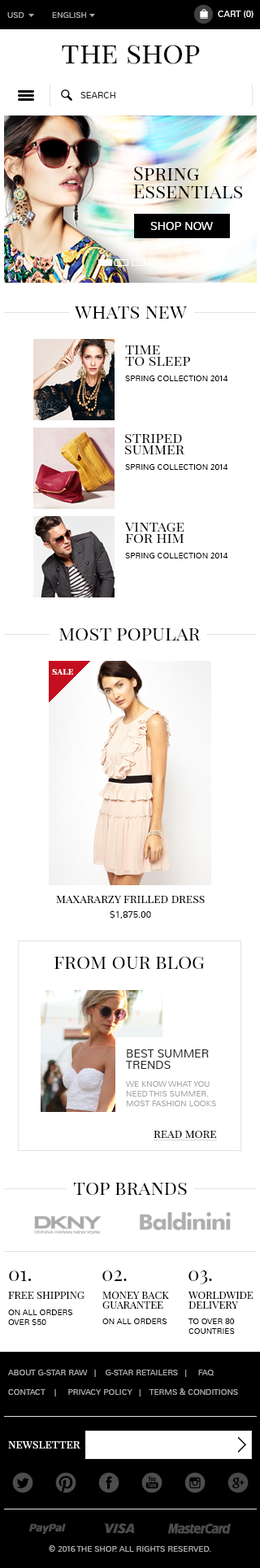
<style>
.page{position:relative;width:260px;height:1568px;background:#ffffff}
.page>*{position:absolute;margin:0}
.t1{font:8.1px "Nunito-Light";color:#aaaaaa;text-transform:uppercase}
.t2{font:8.9px "Nunito-Light";color:#ffffff;text-transform:uppercase}
.t3{font:29.3px "PlayfairDisplaySC-Regular";color:#000000}
.t4{font:8.9px "Nunito-Light";color:#282828;text-transform:uppercase}
.t5{font:19.5px/17.9px "PlayfairDisplaySC-Regular";color:#000000}
.t6{font:11.4px "Nunito-Light";color:#ffffff;text-transform:uppercase}
.t7{font:19.5px "PlayfairDisplaySC-Regular";color:#000000}
.t8{font:14.6px/11.4px "PlayfairDisplaySC-Regular";color:#000000}
.t9{font:8.1px "Nunito-Light";color:#000000;text-transform:uppercase}
.t10{font:8.9px "PlayfairDisplaySC-Bold";color:#ffffff}
.t11{font:11.4px "PlayfairDisplaySC-Regular";color:#000000}
.t12{font:8.9px "Nunito-Light";color:#000000}
.t13{font:11.4px/11.4px "Nunito-Light";color:#282828;text-transform:uppercase}
.t14{font:11.4px "PlayfairDisplaySC-Regular";color:#000000;text-decoration:underline}
.t15{font:10.6px "PlayfairDisplaySC-Regular";color:#000000;text-transform:uppercase}
.t16{font:10.6px/9.8px "PlayfairDisplaySC-Regular";color:#000000;text-transform:uppercase}
.t17{font:8.1px/19.5px "Nunito-Light";color:#aaaaaa;text-transform:uppercase}
.t18{font:11.4px "PlayfairDisplaySC-Regular";color:#ffffff}
</style>
<div class="page">
<p class="t1" style="left:7px;top:12px;width:17px;height:6px">usD</p>
<p class="t1" style="left:52px;top:12px;width:34px;height:6px">English</p>
<p class="t2" style="left:218px;top:11px;width:36px;height:7px">Cart (0)</p>
<p class="t3" style="left:62px;top:45px;width:138px;height:19px">the shop</p>
<p class="t4" style="left:80px;top:92px;width:35px;height:6px">search</p>
<p class="t5" style="left:133px;top:167px;width:110px;height:31px">Spring<br>Essentials</p>
<p class="t6" style="left:150px;top:222px;width:63px;height:8px">shop now</p>
<p class="t7" style="left:74px;top:306px;width:113px;height:13px">whats new</p>
<p class="t8" style="left:125px;top:345px;width:65px;height:21px">time<br>to sleep</p>
<p class="t9" style="left:125px;top:376px;width:103px;height:5px">spring collection 2014</p>
<p class="t8" style="left:125px;top:434px;width:60px;height:20px">striped<br>summer</p>
<p class="t9" style="left:125px;top:464px;width:103px;height:6px">spring collection 2014</p>
<p class="t8" style="left:125px;top:523px;width:60px;height:20px">vintage<br>for him</p>
<p class="t9" style="left:125px;top:553px;width:103px;height:5px">spring collection 2014</p>
<p class="t7" style="left:59px;top:628px;width:142px;height:13px">most popular</p>
<p class="t10" style="left:52px;top:669px;width:21px;height:6px">sale</p>
<p class="t11" style="left:56px;top:896px;width:149px;height:7px">maxararzy frilled dress</p>
<p class="t12" style="left:110px;top:910px;width:41px;height:9px">$1,875.00</p>
<p class="t7" style="left:54px;top:957px;width:151px;height:12px">from our blog</p>
<p class="t13" style="left:126px;top:1049px;width:83px;height:20px">best summer<br>trends</p>
<p class="t1" style="left:126px;top:1081px;width:90px;height:25px">we know what you<br>need this summer.<br>most fashion looks</p>
<p class="t14" style="left:154px;top:1131px;width:63px;height:9px">read more</p>
<p class="t7" style="left:73px;top:1183px;width:114px;height:12px">top brands</p>
<p class="t7" style="left:9px;top:1270px;width:22px;height:11px">01.</p>
<p class="t7" style="left:102px;top:1270px;width:25px;height:11px">02.</p>
<p class="t7" style="left:189px;top:1270px;width:23px;height:14px">03.</p>
<p class="t15" style="left:8px;top:1292px;width:77px;height:7px">Free Shipping</p>
<p class="t16" style="left:102px;top:1292px;width:67px;height:17px">Money back<br>guarantee</p>
<p class="t16" style="left:188px;top:1292px;width:66px;height:17px">Worldwide<br>Delivery</p>
<p class="t9" style="left:8px;top:1310px;width:65px;height:16px">On all orders<br>over $50</p>
<p class="t9" style="left:102px;top:1318px;width:65px;height:6px">On all orders</p>
<p class="t9" style="left:189px;top:1318px;width:46px;height:16px">To over 80<br>countries</p>
<p class="t17" style="left:8px;top:1370px;width:230px;height:26px">About G-Star Raw   |    G-Star Retailers   |     FAQ<br>Contact    |     Privacy Policy   |    Terms &amp; Conditions</p>
<p class="t18" style="left:8px;top:1441px;width:72px;height:8px">newsletter</p>
<p class="t1" style="left:49px;top:1545px;width:162px;height:7px">© 2016 the shop. All Rights Reserved.</p>
</div>
